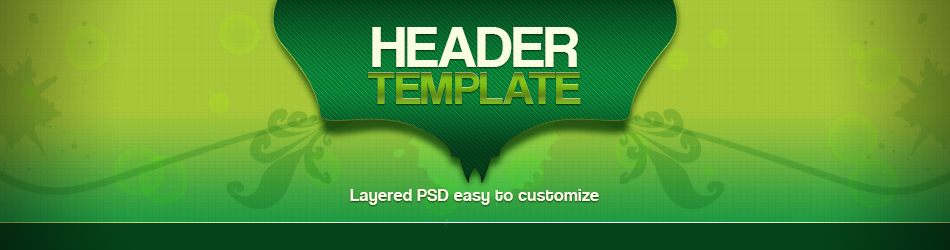
<style>
.page{position:relative;width:950px;height:250px}
.page>*{position:absolute;margin:0}
.t1{font:60px "CoolveticaRg-Regular";color:#f7ffe0}
.t2{font:48px "CoolveticaRg-Regular"}
.t3{font:18px "CoolveticaRg-Regular";letter-spacing:0.02em;color:#f7ffe0}
</style>
<div class="page">
<p class="t1" style="left:372px;top:27px;width:206px;height:40px">HEADER</p>
<p class="t2" style="left:368px;top:72px;width:213px;height:32px">TEMPLATE</p>
<p class="t3" style="left:350px;top:189px;width:249px;height:16px">Layered PSD easy to customize</p>
</div>
